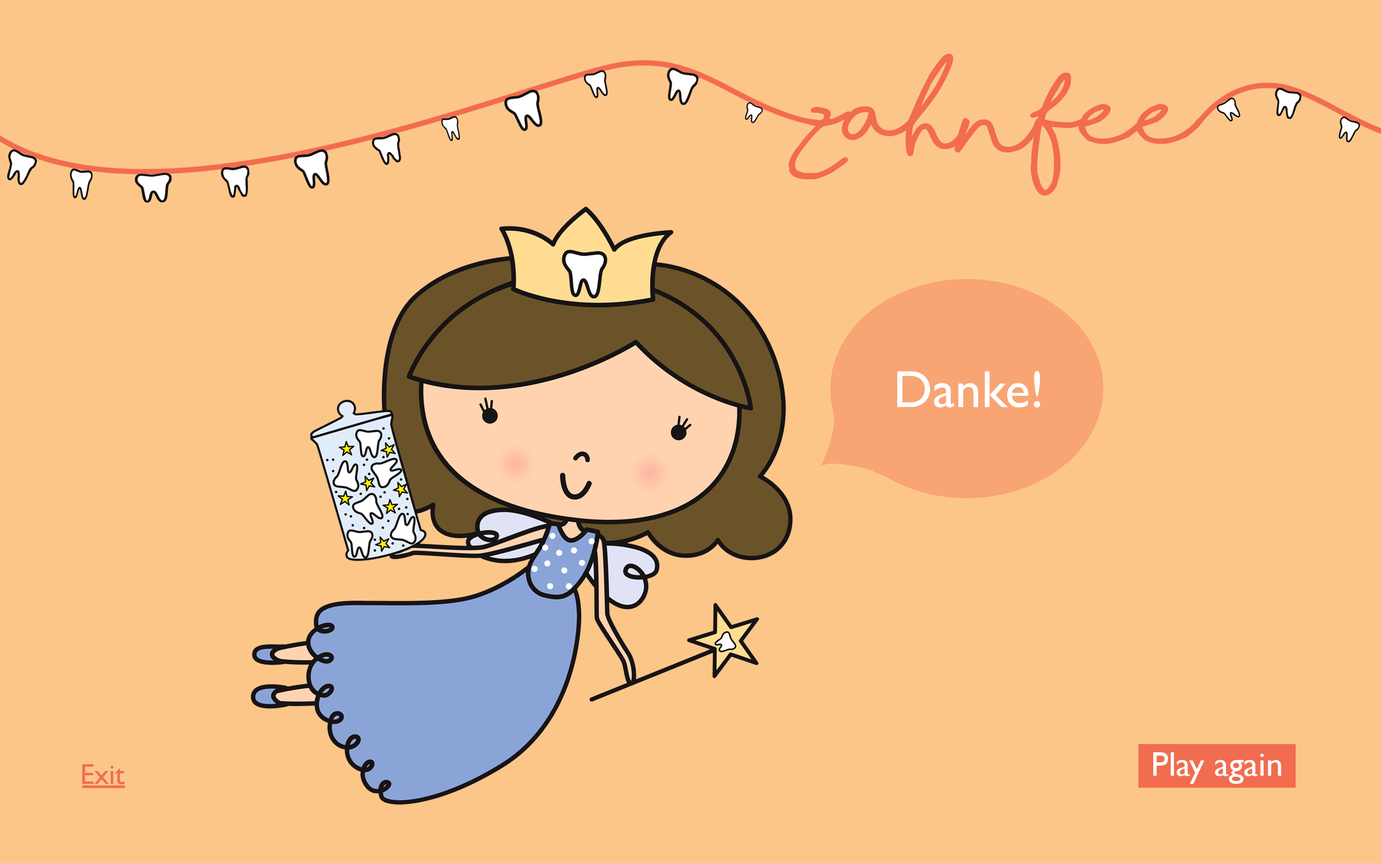
<style>
.page{position:relative;width:1381px;height:863px;background:#fdc689}
.page>*{position:absolute;margin:0}
.t1{font:95.9px "ShorelinesScriptBold";color:#f26c4f}
.t2{font:52.5px "GillSans";color:#ffffff}
.t3{font:34.5px "GillSans";color:#ffffff}
.t4{font:28.8px "GillSans";color:#f26c4f}
</style>
<div class="page">
<p class="t1" style="left:788px;top:54px;width:415px;height:142px">zahnfee</p>
<p class="t2" style="left:897px;top:371px;width:144px;height:37px">Danke!</p>
<p class="t3" style="left:1153px;top:753px;width:129px;height:31px">Play again</p>
<p class="t4" style="left:82px;top:764px;width:43px;height:21px">Exit</p>
</div>
